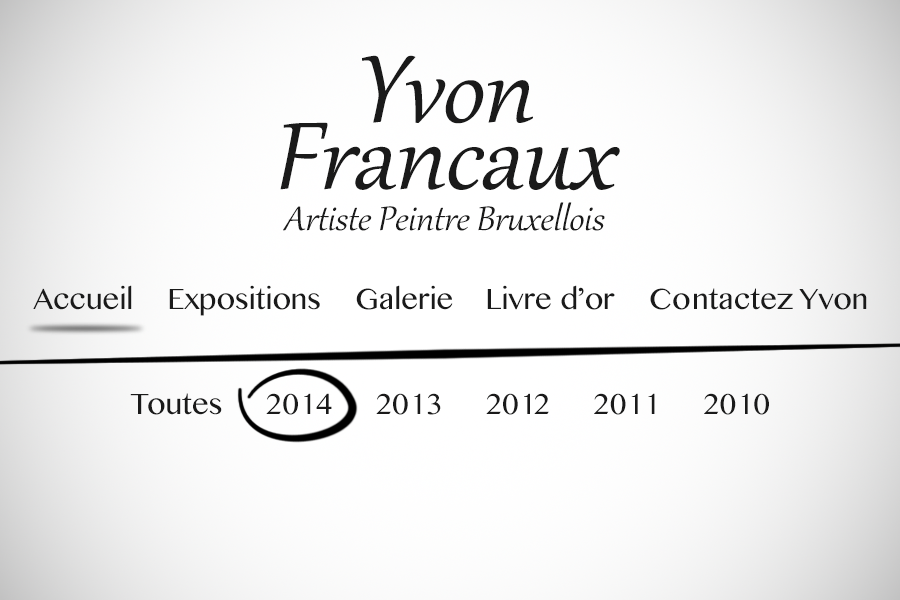
<style>
.page{position:relative;width:900px;height:600px}
.page>*{position:absolute;margin:0}
.t1{font:41.7px/41.7px "Gabriola";color:#1a1a1a;font-style:italic}
.t2{font:116.7px/66.7px "Gabriola";color:#1a1a1a;font-style:italic}
.t3{font:29.2px "TamilMN";color:#1a1a1a}
</style>
<div class="page">
<p class="t1" style="left:280px;top:55px;width:340px;height:176px;text-align:center"><span class="t2">Yvon<br>Francaux<br></span>Artiste Peintre Bruxellois</p>
<p class="t3" style="left:33px;top:285px;width:834px;height:31px">Accueil    Expositions    Galerie    Livre d’or    Contactez Yvon</p>
<p class="t3" style="left:130px;top:393px;width:639px;height:22px">Toutes     2014     2013     2012     2011     2010</p>
</div>
